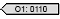
<style>
.page{position:relative;width:60px;height:19px;background:#ffffff}
.page>*{position:absolute;margin:0}
.t1{font:8px "ArialMT";color:#000000;font-variant:small-caps}
</style>
<div class="page">
<p class="t1" style="left:15px;top:6px;width:32px;height:6px">O1: 0110</p>
</div>
